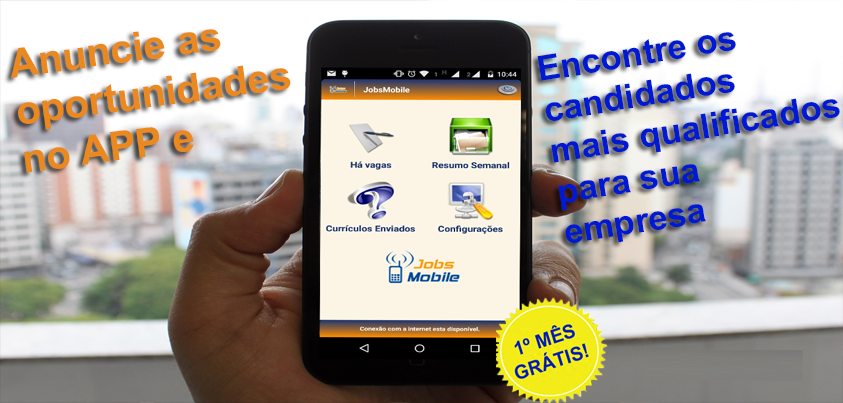
<style>
.page{position:relative;width:843px;height:403px}
.page>*{position:absolute;margin:0}
.t1{font:40px "Arial-BoldMT";color:#eb881e}
.t2{font:34.4px "Arial-BoldMT";color:#0019d3}
</style>
<div class="page">
<p class="t1" style="left:11px;top:29px;width:280px;height:144px;rotate:-8deg">Anuncie as <br>oportunidades <br>no APP e</p>
<p class="t2" style="left:537px;top:32px;width:303px;height:211px;rotate:-9deg">Encontre os <br>candidados <br>mais qualificados<br>para sua <br>empresa</p>
</div>
